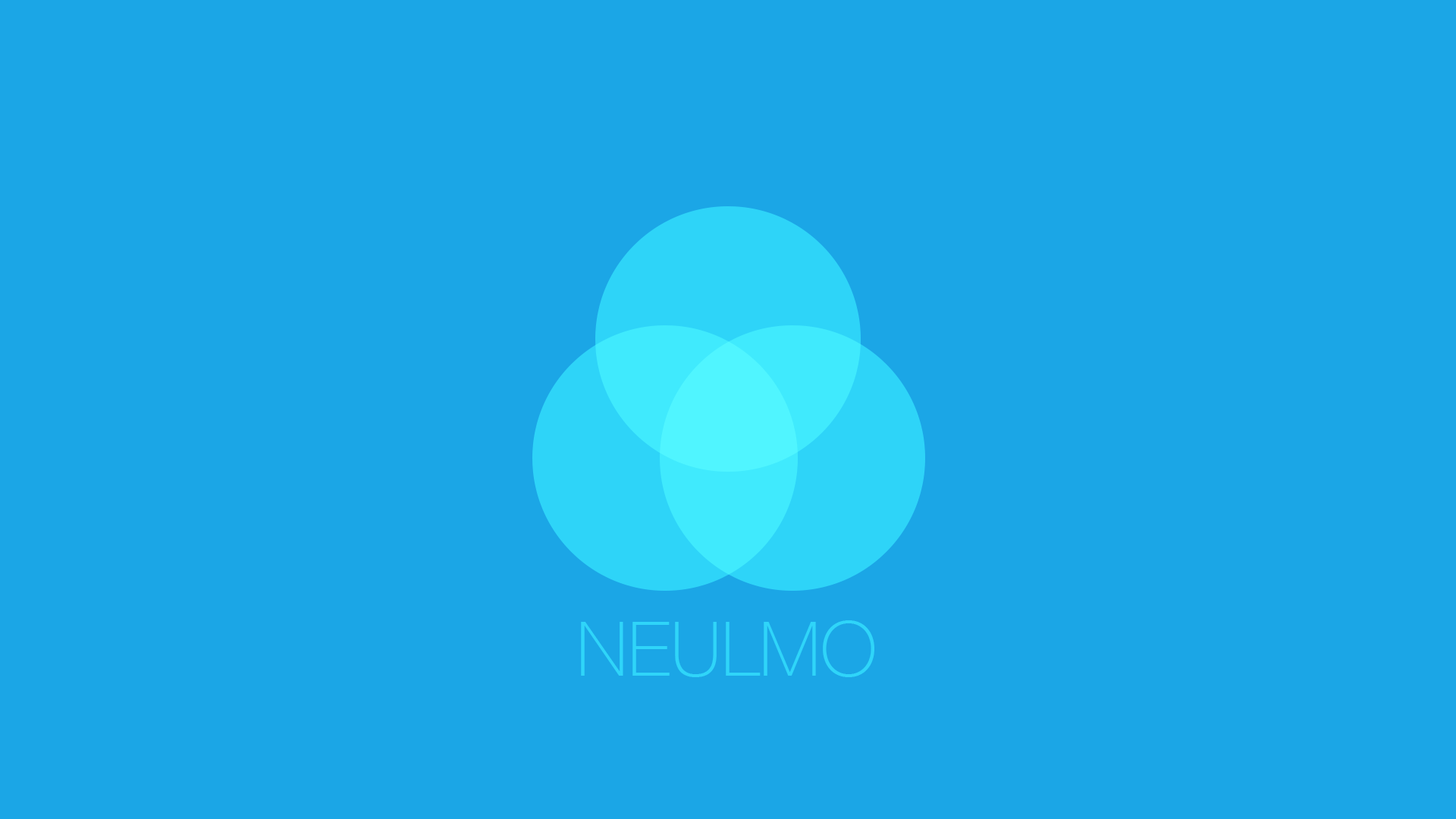
<style>
.page{position:relative;width:1456px;height:819px;background:#1ba6e6}
.page>*{position:absolute;margin:0}
.t1{font:75.8px "HelveticaNeue-Thin";color:#2fd5f9}
</style>
<div class="page">
<p class="t1" style="left:581px;top:620px;width:293px;height:57px">NEULMO</p>
</div>
